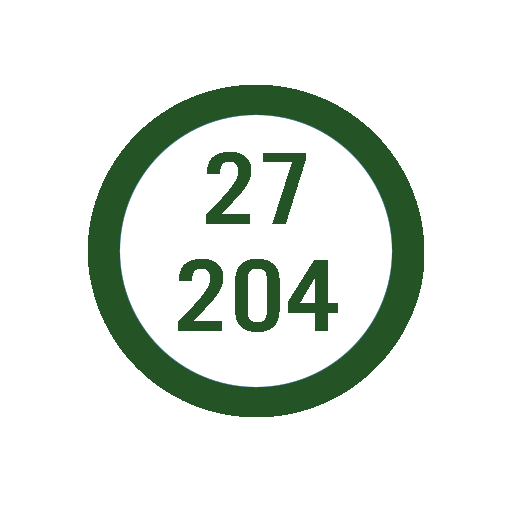
<style>
.page{position:relative;width:512px;height:512px;background:#ffffff}
.page>*{position:absolute;margin:0}
.t1{font:106.7px/106.7px "UTM-Alter-Gothic";letter-spacing:0.01em;color:#245326;scale:1.25 1}
</style>
<div class="page">
<p class="t1" style="left:178px;top:152px;width:160px;height:180px;text-align:center">27<br>204</p>
</div>
